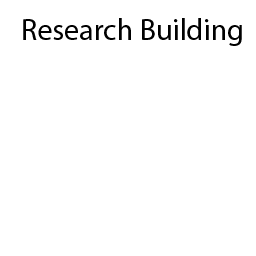
<style>
.page{position:relative;width:256px;height:256px;background:#ffffff}
.page>*{position:absolute;margin:0}
.t1{font:30px "MyriadPro-Regular";color:#000000}
</style>
<div class="page">
<p class="t1" style="left:23px;top:18px;width:219px;height:28px">Research Building</p>
</div>
